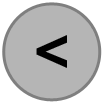
<style>
.page{position:relative;width:106px;height:106px;background:#b5b5b5}
.page>*{position:absolute;margin:0}
.t1{font:60px "HelveticaLTStd-Blk";color:#000000}
</style>
<div class="page">
<p class="t1" style="left:36px;top:35px;width:31px;height:33px">&lt;</p>
</div>
